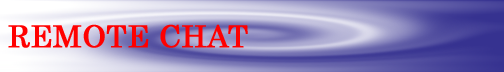
<style>
.page{position:relative;width:504px;height:72px}
.page>*{position:absolute;margin:0}
.t1{font:30px "Century";color:#ff0000;font-weight:bold}
</style>
<div class="page">
<p class="t1" style="left:8px;top:24px;width:240px;height:24px">REMOTE CHAT</p>
</div>
